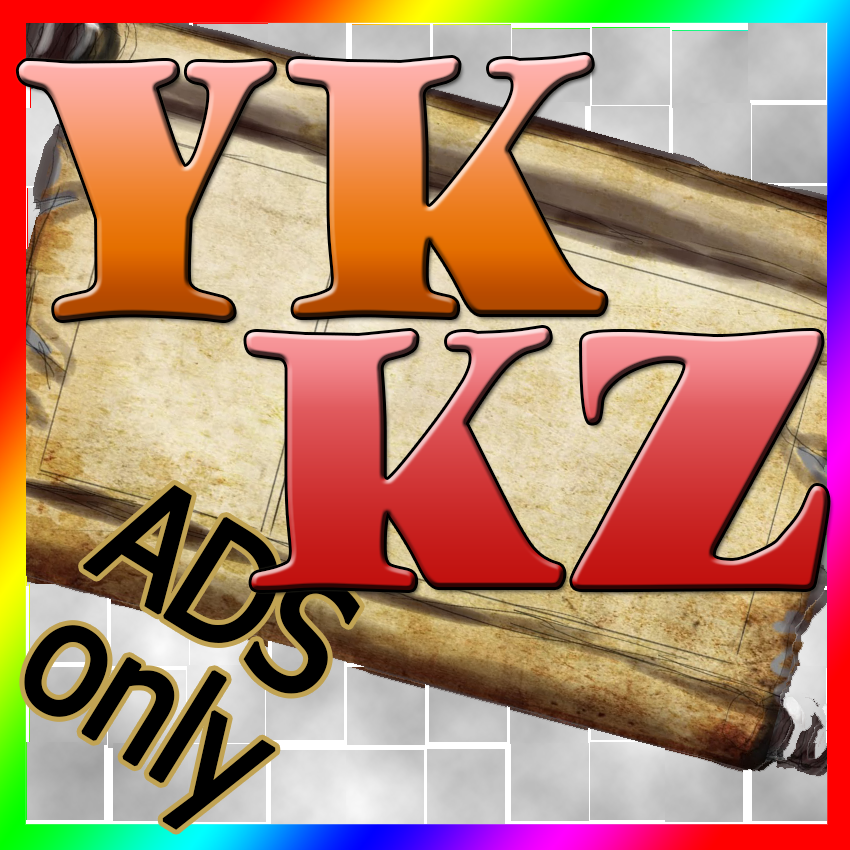
<style>
.page{position:relative;width:850px;height:850px}
.page>*{position:absolute;margin:0}
.t1{font:341.3px "GoudyStout";letter-spacing:-0.16em;scale:0.71 1}
.t2{font:158.1px "Tahoma";letter-spacing:-0.04em;color:#000000;font-weight:bold;scale:0.91 1}
</style>
<div class="page">
<p class="t1" style="left:18px;top:55px;width:810px;height:535px">YK<br>       KZ</p>
<p class="t2" style="left:24px;top:484px;width:336px;height:346px;rotate:32deg">ADS <br>only</p>
</div>
